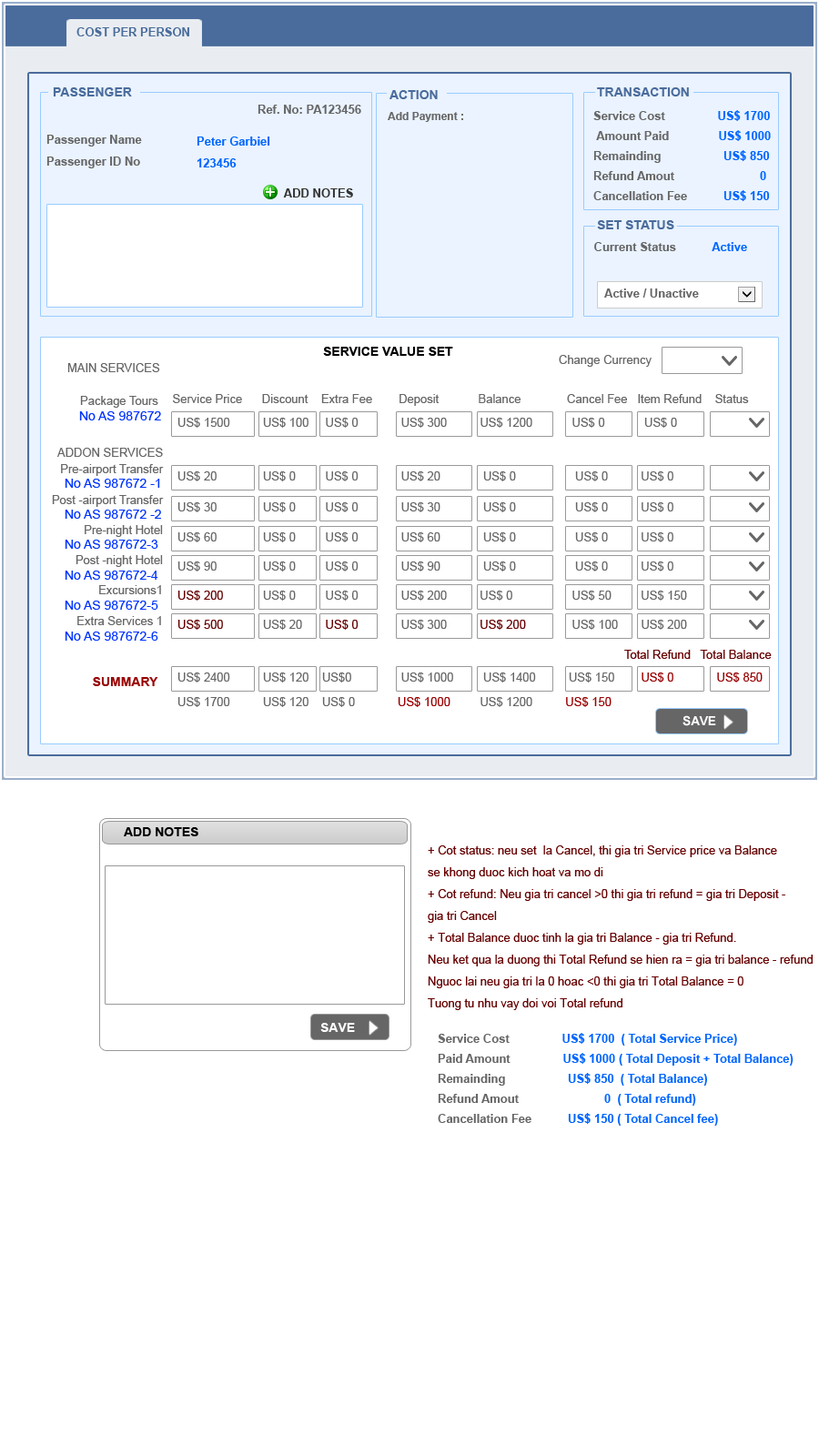
<style>
.page{position:relative;width:819px;height:1456px;background:#ffffff}
.page>*{position:absolute;margin:0}
.t1{font:11.8px "Arial-BoldMT";color:#4a6c9c}
.t2{font:12.7px "Arial-BoldMT";color:#4a6c9c}
.t3{font:11.8px "Arial-BoldMT";color:#666666}
.t4{font:10.9px "Arial-BoldMT";color:#666666}
.t5{font:11.8px/20px "Arial-BoldMT";color:#666666}
.t6{font:11.8px/20px "Arial-BoldMT";color:#0066ff}
.t7{font:11.8px/21.8px "Arial-BoldMT";color:#666666}
.t8{font:11.8px/23.7px "Arial-BoldMT";color:#666666}
.t9{font:11.8px/21.8px "Arial-BoldMT";color:#0066ff}
.t10{font:11.8px "Arial-BoldMT";color:#333333}
.t11{font:11.8px "Arial-BoldMT";color:#0066ff}
.t12{font:12.7px "Arial-BoldMT";color:#000000}
.t13{font:11.8px "ArialMT";color:#666666}
.t14{font:12.7px "ArialMT";color:#0033ff}
.t15{font:11.8px/30px "ArialMT";color:#666666}
.t16{font:11.8px/30.9px "ArialMT";color:#666666}
.t17{font:11.8px "ArialMT";color:#660000}
.t18{font:12.7px "Arial-BoldMT";color:#990000}
.t19{font:11.8px "ArialMT";color:#990000}
.t20{font:12.7px "Arial-BoldMT";color:#ffffff}
.t21{font:11.8px/21.8px "ArialMT";color:#660000}
</style>
<div class="page">
<p class="t1" style="left:76px;top:27px;width:113px;height:9px">COST PER PERSON</p>
<p class="t2" style="left:53px;top:87px;width:79px;height:9px">PASSENGER</p>
<p class="t2" style="left:597px;top:87px;width:92px;height:9px">TRANSACTION</p>
<p class="t2" style="left:389px;top:90px;width:49px;height:9px">ACTION</p>
<p class="t3" style="left:258px;top:105px;width:103px;height:9px">Ref. No: PA123456</p>
<p class="t4" style="left:388px;top:112px;width:75px;height:10px">Add Payment :</p>
<p class="t5" style="left:593px;top:110px;width:178px;height:91px;text-align:justify">Service Cost                <span class="t6">US$ 1700<br></span> Amount Paid               <span class="t6">US$ 1000 <br></span>Remainding                   <span class="t6">US$ 850<br></span>Refund Amout                          <span class="t6">0<br></span>Cancellation Fee <span class="t6">          US$ 150</span></p>
<p class="t7" style="left:46px;top:135px;width:96px;height:33px;text-align:justify"><span class="t8"><br></span>Passenger Name  <br>Passenger ID No</p>
<p class="t9" style="left:197px;top:136px;width:73px;height:31px;text-align:justify">Peter Garbiel<br>123456</p>
<p class="t10" style="left:283px;top:188px;width:70px;height:9px">ADD NOTES</p>
<p class="t2" style="left:597px;top:220px;width:77px;height:9px">SET STATUS</p>
<p class="t3" style="left:594px;top:242px;width:153px;height:9px">Current Status           <span class="t11">Active</span></p>
<p class="t3" style="left:604px;top:288px;width:95px;height:10px">Active / Unactive</p>
<p class="t12" style="left:323px;top:347px;width:130px;height:9px">SERVICE VALUE SET</p>
<p class="t13" style="left:67px;top:363px;width:93px;height:9px">MAIN SERVICES</p>
<p class="t13" style="left:559px;top:355px;width:93px;height:12px">Change Currency</p>
<p class="t13" style="left:80px;top:396px;width:78px;height:12px">Package Tours</p>
<p class="t13" style="left:173px;top:394px;width:576px;height:12px">Service Price      Discount    Extra Fee        Deposit            Balance              Cancel Fee   Item Refund    Status</p>
<p class="t14" style="left:79px;top:411px;width:82px;height:9px">No AS 987672</p>
<p class="t13" style="left:177px;top:418px;width:500px;height:10px">US$ 1500          US$ 100     US$ 0             US$ 300          US$ 1200            US$ 0            US$ 0</p>
<p class="t13" style="left:57px;top:448px;width:106px;height:9px">ADDON SERVICES</p>
<p class="t15" style="left:52px;top:464px;width:112px;height:161px;text-align:right"><span class="t16">Pre-airport Transfer<br>Post -airport Transfer<br></span>Pre-night Hotel<br>Post -night Hotel<br>Excursions1<br><span class="t16">Extra Services 1</span></p>
<p class="t13" style="left:177px;top:471px;width:496px;height:10px">US$ 20              US$ 0         US$ 0             US$ 20             US$ 0                  US$ 0          US$ 0</p>
<p class="t14" style="left:65px;top:479px;width:96px;height:162px;text-align:justify">No AS 987672 -1<br><br>No AS 987672 -2<br><br>No AS 987672-3<br><br>No AS 987672-4<br><br>No AS 987672-5<br><br>No AS 987672-6</p>
<p class="t13" style="left:177px;top:502px;width:496px;height:10px">US$ 30              US$ 0         US$ 0             US$ 30             US$ 0                  US$ 0          US$ 0</p>
<p class="t13" style="left:177px;top:532px;width:496px;height:10px">US$ 60              US$ 0         US$ 0             US$ 60             US$ 0                  US$ 0          US$ 0</p>
<p class="t13" style="left:177px;top:561px;width:496px;height:10px">US$ 90              US$ 0         US$ 0             US$ 90             US$ 0                  US$ 0          US$ 0</p>
<p class="t13" style="left:177px;top:591px;width:510px;height:10px"><span class="t17">US$ 200 </span>           US$ 0         US$ 0             US$ 200          US$ 0                  US$ 50         US$ 150</p>
<p class="t13" style="left:177px;top:620px;width:510px;height:10px"><span class="t17">US$ 500  </span>          US$ 20       <span class="t17">US$ 0   </span>          US$ 300          <span class="t17">US$ 200      </span>        US$ 100       US$ 200</p>
<p class="t17" style="left:624px;top:650px;width:148px;height:9px">Total Refund   Total Balance</p>
<p class="t18" style="left:93px;top:677px;width:65px;height:9px">SUMMARY</p>
<p class="t13" style="left:177px;top:672px;width:586px;height:10px">US$ 2400          US$ 120    US$0               US$ 1000         US$ 1400          US$ 150        <span class="t19">US$ 0             US$ 850</span></p>
<p class="t13" style="left:177px;top:697px;width:435px;height:10px">US$ 1700          US$ 120    US$ 0             <span class="t19">US$ 1000</span>         US$ 1200         <span class="t19"> US$ 150</span></p>
<p class="t20" style="left:682px;top:715px;width:34px;height:11px">SAVE</p>
<p class="t12" style="left:124px;top:827px;width:74px;height:9px">ADD NOTES</p>
<p class="t21" style="left:428px;top:845px;width:385px;height:165px;text-align:justify">+ Cot status: neu set  la Cancel, thi gia tri Service price va Balance<br>se khong duoc kich hoat va mo di<br>+ Cot refund: Neu gia tri cancel &gt;0 thi gia tri refund = gia tri Deposit -<br>gia tri Cancel<br>+ Total Balance duoc tinh la gia tri Balance - gia tri Refund.  <br>Neu ket qua la duong thi Total Refund se hien ra = gia tri balance - refund    <br>Nguoc lai neu gia tri la 0 hoac &lt;0 thi gia tri Total Balance = 0    <br>Tuong tu nhu vay doi voi Total refund</p>
<p class="t20" style="left:320px;top:1023px;width:35px;height:9px">SAVE</p>
<p class="t6" style="left:438px;top:1033px;width:356px;height:93px;text-align:justify"><span class="t5">Service Cost                </span>US$ 1700  ( Total Service Price)<br><span class="t5">Paid Amount                </span>US$ 1000 ( Total Deposit + Total Balance)<br><span class="t5">Remainding                   </span>US$ 850  ( Total Balance)<br><span class="t5">Refund Amout                          </span>0  ( Total refund)<br><span class="t5">Cancellation Fee </span>          US$ 150 ( Total Cancel fee)</p>
</div>
